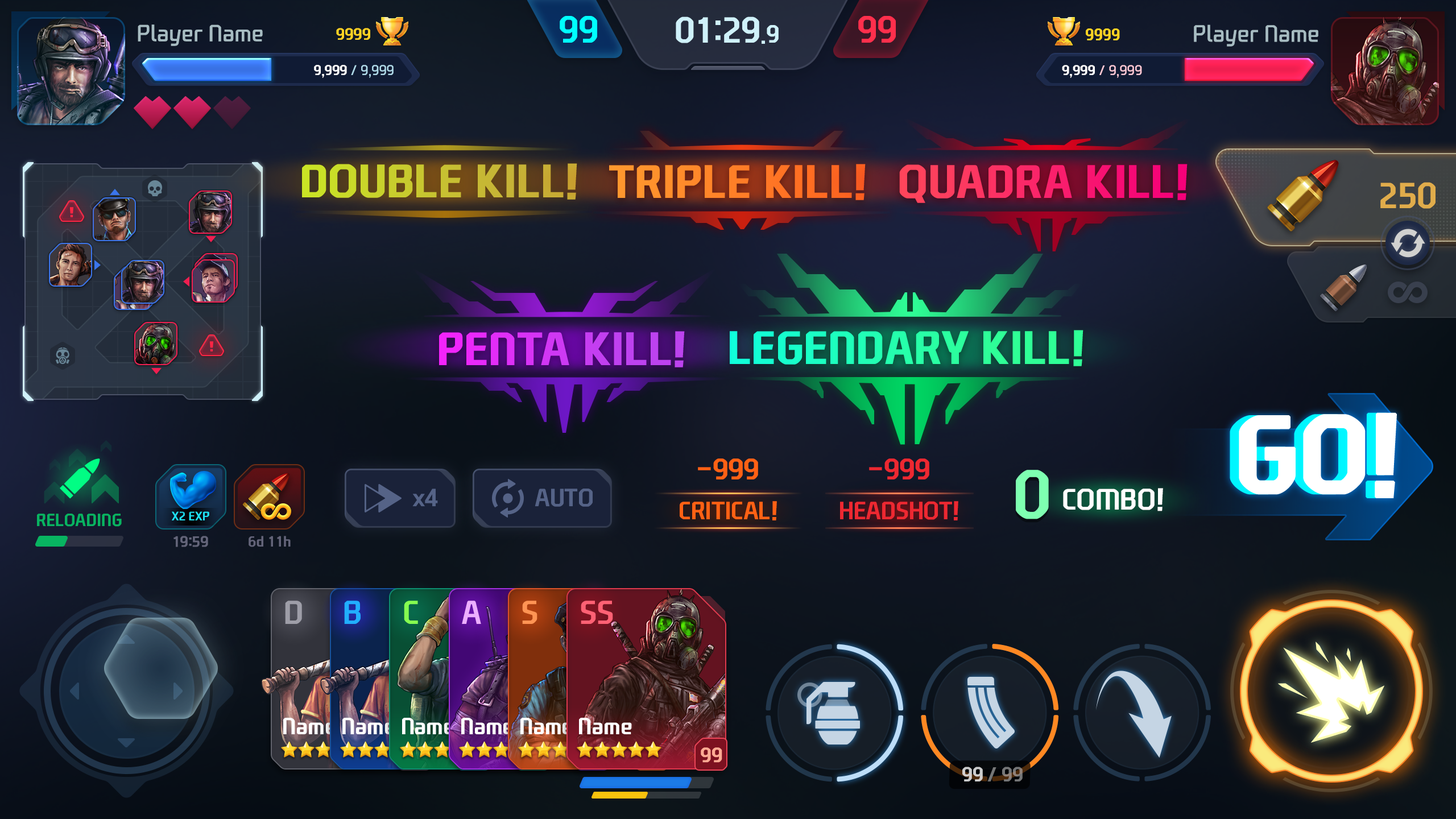
<style>
.page{position:relative;width:1456px;height:819px}
.page>*{position:absolute;margin:0}
.t1{font:36.4px "NEXONFootballGothicB";color:#00ffff;text-transform:uppercase}
.t2{font:34.9px "NEXONFootballGothicB";color:#cff1fa;text-transform:uppercase}
.t3{font:24px "NEXONFootballGothicB";color:#cff1fa;text-transform:uppercase}
.t4{font:36.4px "NEXONFootballGothicB";color:#ff2f4c;text-transform:uppercase}
.t5{font:22.7px "NEXONFootballGothicL";color:#a7bcc2}
.t6{font:15.9px "NEXONFootballGothicB";color:#ffd323}
.t7{font:16.2px "NEXONFootballGothicB";color:#ffd323}
.t8{font:22.9px "NEXONFootballGothicL";color:#a7bcc2}
.t9{font:13.7px "NEXONFootballGothicL";color:#afd9e9}
.t10{font:13.7px "NEXONFootballGothicB";color:#ffffff}
.t11{font:13.6px "NEXONFootballGothicL";color:#ffc9d6}
.t12{font:13.6px "NEXONFootballGothicB";color:#ffffff}
.t13{font:44.4px "NEXONFootballGothicB";text-transform:uppercase;font-weight:bold}
.t14{font:44.4px "NEXONFootballGothicB";color:#ff7f27;text-transform:uppercase;font-weight:bold}
.t15{font:34.9px "NEXONFootballGothicB";color:#e0ac4b;text-transform:uppercase}
.t16{font:44.4px "NEXONFootballGothicB";color:#d037f4;text-transform:uppercase;font-weight:bold}
.t17{font:103.7px "NEXONFootballGothicB";letter-spacing:-0.025em;color:#ffffff;text-transform:uppercase;font-weight:bold}
.t18{font:28.4px "NEXONFootballGothicB";letter-spacing:-0.01em;color:#ff6114;text-transform:uppercase}
.t19{font:28.4px "NEXONFootballGothicB";letter-spacing:-0.01em;color:#ed2831;text-transform:uppercase}
.t20{font:65.5px "NEXONFootballGothicB";color:#7effb1;text-transform:uppercase}
.t21{font:23.9px "NEXONFootballGothicB";color:#556387}
.t22{font:28.4px "NEXONFootballGothicB";color:#ffffff;text-transform:uppercase}
.t23{font:24.1px "NEXONFootballGothicB";letter-spacing:-0.01em;color:#ff6114;text-transform:uppercase}
.t24{font:24.1px "NEXONFootballGothicB";letter-spacing:-0.01em;color:#ed2831;text-transform:uppercase}
.t25{font:17.1px "NEXONFootballGothicB";color:#08b461;text-transform:uppercase}
.t26{font:12px "NEXONFootballGothicB";color:#1fe2f5;text-transform:uppercase}
.t27{font:14.2px "NEXONFootballGothicL";color:#636479;text-transform:uppercase;font-weight:bold}
.t28{font:14.2px "NEXONFootballGothicB";color:#636479}
.t29{font:19.6px "NEXONFootballGothicB";color:#cbcccc;text-transform:uppercase}
.t30{font:19.6px "NEXONFootballGothicB";color:#757677;text-transform:uppercase}
</style>
<div class="page">
<p class="t1" style="left:560px;top:16px;width:37px;height:27px">99</p>
<p class="t2" style="left:676px;top:16px;width:103px;height:28px">01:29<span class="t3">.9</span></p>
<p class="t4" style="left:858px;top:16px;width:38px;height:27px">99</p>
<p class="t5" style="left:138px;top:24px;width:125px;height:22px">Player Name</p>
<p class="t6" style="left:336px;top:28px;width:34px;height:12px">9999</p>
<p class="t7" style="left:1086px;top:28px;width:34px;height:12px">9999</p>
<p class="t8" style="left:1194px;top:24px;width:124px;height:23px">Player Name</p>
<p class="t9" style="left:314px;top:65px;width:80px;height:13px"><span class="t10">9,999 </span>/ 9,999</p>
<p class="t11" style="left:1062px;top:65px;width:80px;height:13px"><span class="t12">9,999 </span>/ 9,999</p>
<p class="t13" style="left:302px;top:163px;width:275px;height:37px">double kill!</p>
<p class="t14" style="left:609px;top:164px;width:257px;height:36px">triple kill!</p>
<p class="t13" style="left:899px;top:164px;width:289px;height:39px">quadra kill!</p>
<p class="t15" style="left:1380px;top:182px;width:56px;height:27px">250</p>
<p class="t13" style="left:730px;top:330px;width:353px;height:36px">legendary kill!</p>
<p class="t16" style="left:439px;top:331px;width:246px;height:36px">penta kill!</p>
<p class="t17" style="left:1239px;top:412px;width:158px;height:86px">go!</p>
<p class="t18" style="left:698px;top:458px;width:60px;height:21px">-999</p>
<p class="t19" style="left:869px;top:458px;width:60px;height:21px">-999</p>
<p class="t20" style="left:1016px;top:470px;width:33px;height:49px">0</p>
<p class="t21" style="left:412px;top:489px;width:26px;height:18px">x4</p>
<p class="t21" style="left:535px;top:489px;width:58px;height:18px">AUTO</p>
<p class="t22" style="left:1063px;top:488px;width:100px;height:23px">combo!</p>
<p class="t23" style="left:680px;top:501px;width:97px;height:19px">critical!</p>
<p class="t24" style="left:840px;top:501px;width:118px;height:19px">headshot!</p>
<p class="t25" style="left:37px;top:514px;width:85px;height:13px">Reloading</p>
<p class="t26" style="left:172px;top:511px;width:37px;height:9px">x2 exp</p>
<p class="t27" style="left:173px;top:536px;width:35px;height:11px">19:59</p>
<p class="t28" style="left:249px;top:536px;width:42px;height:11px">6d 11h</p>
<p class="t29" style="left:962px;top:767px;width:21px;height:14px">99</p>
<p class="t30" style="left:987px;top:767px;width:36px;height:14px">/ 99</p>
</div>
